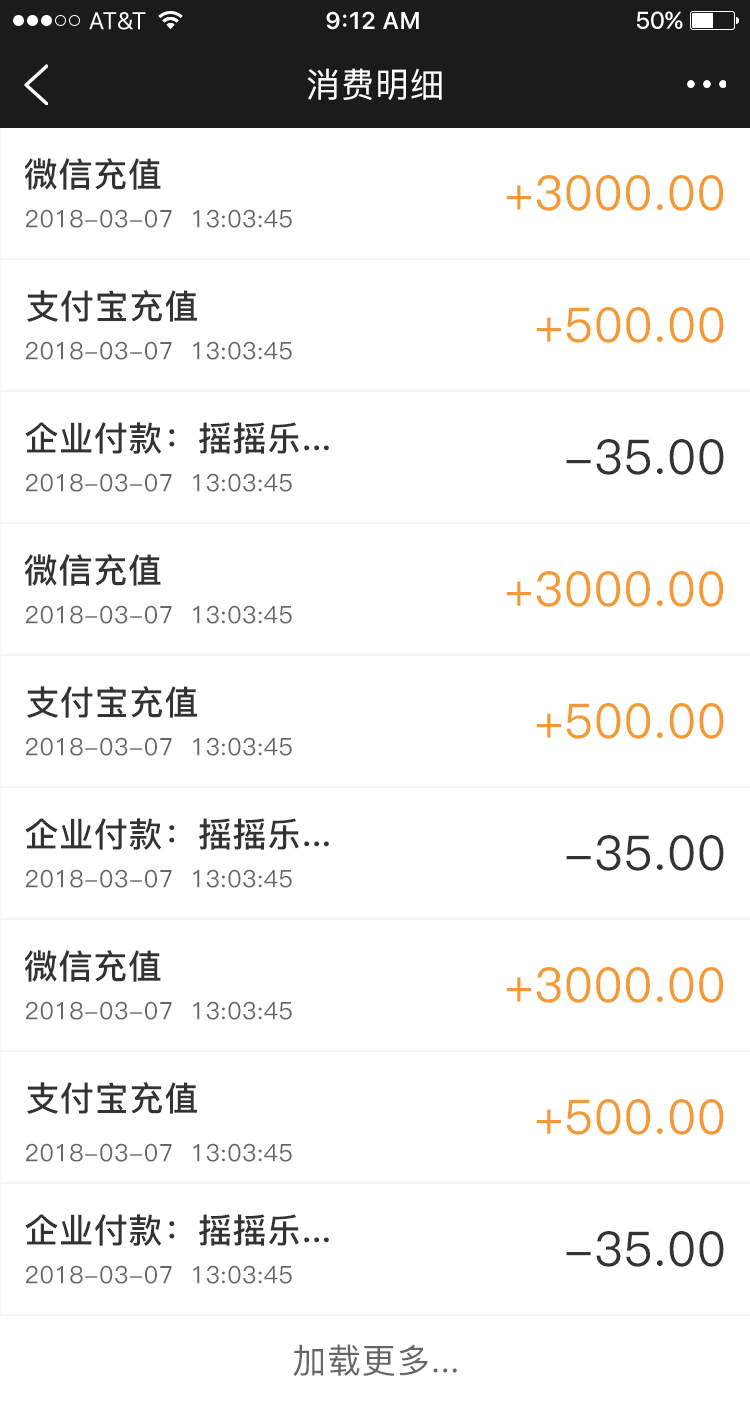
<style>
.page{position:relative;width:750px;height:1404px;background:#ffffff}
.page>*{position:absolute;margin:0}
.t1{font:34px "PingFang-SC-Medium";letter-spacing:0.02em;color:#ffffff}
.t2{font:34px "PingFang-SC-Bold";letter-spacing:0.02em;color:#333333}
.t3{font:48px "PingFang-SC-Medium";letter-spacing:0.02em;color:#f39a36}
.t4{font:24px "PingFang-SC-Medium";letter-spacing:0.02em;color:#666666}
.t5{font:48px "PingFang-SC-Medium";letter-spacing:0.02em;color:#333333}
.t6{font:34px "PingFang-SC-Medium";letter-spacing:0.02em;color:#666666}
</style>
<div class="page">
<p class="t1" style="left:307px;top:68px;width:135px;height:32px">消费明细</p>
<p class="t2" style="left:24px;top:158px;width:137px;height:32px">微信充值</p>
<p class="t3" style="left:506px;top:175px;width:218px;height:36px">+3000.00</p>
<p class="t4" style="left:26px;top:209px;width:266px;height:19px">2018-03-07  13:03:45</p>
<p class="t2" style="left:27px;top:290px;width:170px;height:32px">支付宝充值</p>
<p class="t3" style="left:536px;top:307px;width:188px;height:36px">+500.00</p>
<p class="t4" style="left:26px;top:341px;width:266px;height:19px">2018-03-07  13:03:45</p>
<p class="t2" style="left:25px;top:422px;width:304px;height:32px">企业付款：摇摇乐...</p>
<p class="t5" style="left:566px;top:439px;width:158px;height:36px">-35.00</p>
<p class="t4" style="left:26px;top:473px;width:266px;height:19px">2018-03-07  13:03:45</p>
<p class="t2" style="left:24px;top:554px;width:137px;height:32px">微信充值</p>
<p class="t3" style="left:506px;top:571px;width:218px;height:36px">+3000.00</p>
<p class="t4" style="left:26px;top:605px;width:266px;height:19px">2018-03-07  13:03:45</p>
<p class="t2" style="left:27px;top:686px;width:170px;height:32px">支付宝充值</p>
<p class="t3" style="left:536px;top:703px;width:188px;height:36px">+500.00</p>
<p class="t4" style="left:26px;top:737px;width:266px;height:19px">2018-03-07  13:03:45</p>
<p class="t2" style="left:25px;top:818px;width:304px;height:32px">企业付款：摇摇乐...</p>
<p class="t5" style="left:566px;top:835px;width:158px;height:36px">-35.00</p>
<p class="t4" style="left:26px;top:869px;width:266px;height:19px">2018-03-07  13:03:45</p>
<p class="t2" style="left:24px;top:950px;width:137px;height:32px">微信充值</p>
<p class="t3" style="left:506px;top:967px;width:218px;height:36px">+3000.00</p>
<p class="t4" style="left:26px;top:1001px;width:266px;height:19px">2018-03-07  13:03:45</p>
<p class="t2" style="left:27px;top:1082px;width:170px;height:32px">支付宝充值</p>
<p class="t3" style="left:536px;top:1099px;width:188px;height:36px">+500.00</p>
<p class="t4" style="left:26px;top:1143px;width:266px;height:19px">2018-03-07  13:03:45</p>
<p class="t2" style="left:25px;top:1214px;width:304px;height:32px">企业付款：摇摇乐...</p>
<p class="t5" style="left:566px;top:1231px;width:158px;height:36px">-35.00</p>
<p class="t4" style="left:26px;top:1265px;width:266px;height:19px">2018-03-07  13:03:45</p>
<p class="t6" style="left:293px;top:1344px;width:164px;height:32px">加载更多...</p>
</div>
